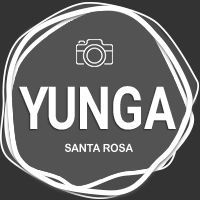
<style>
.page{position:relative;width:200px;height:200px;background:#535353}
.page>*{position:absolute;margin:0}
.t1{font:29.8px "Roboto-Bold";color:#ffffff;scale:0.8 1}
.t2{font:5.6px "ArialRoundedMTBold";color:#ffffff;scale:0.93 1}
</style>
<div class="page">
<p class="t1" style="left:19px;top:86px;width:157px;height:44px">YUNGA</p>
<p class="t2" style="left:65px;top:143px;width:68px;height:9px">SANTA ROSA</p>
</div>
